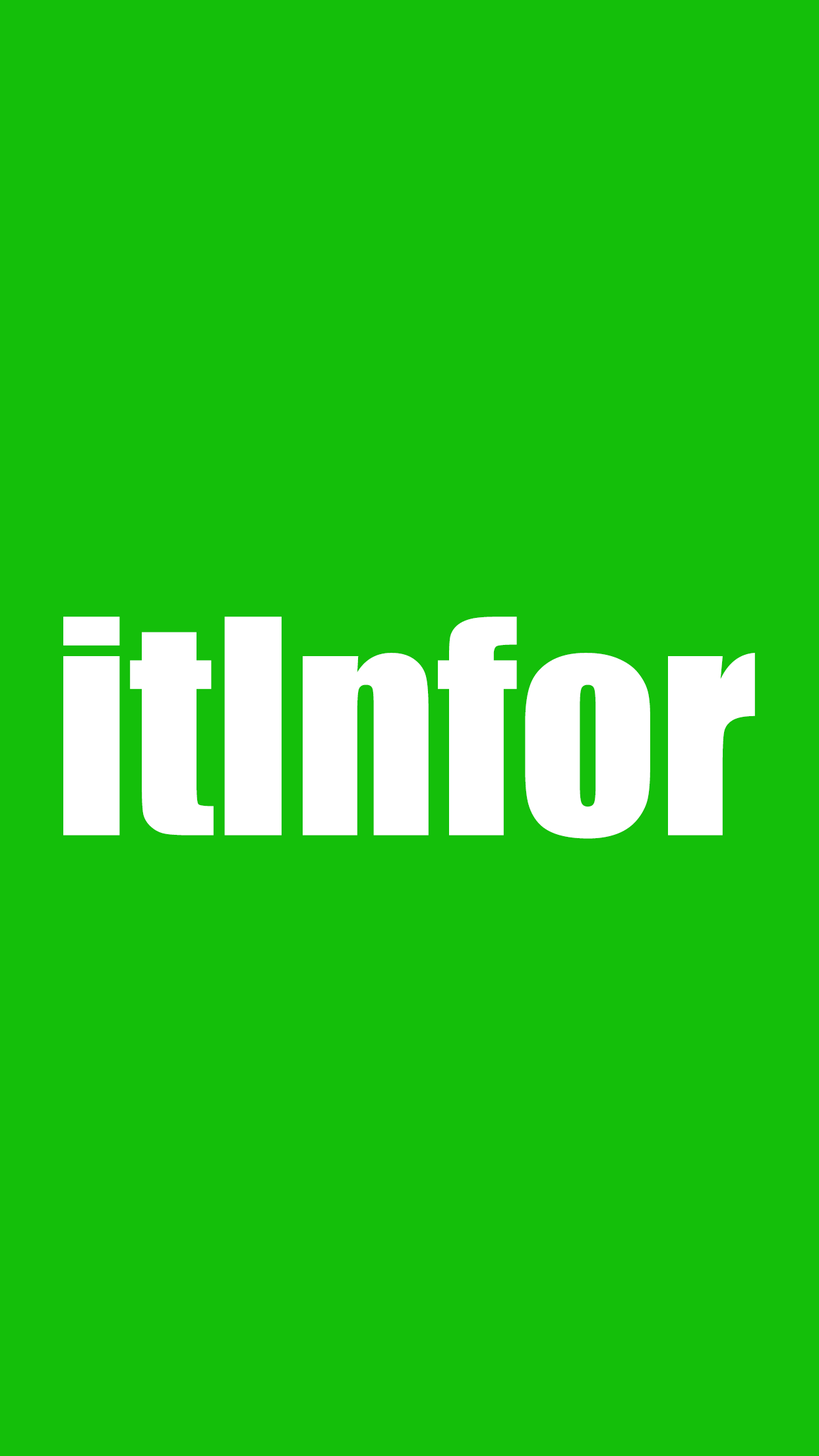
<style>
.page{position:relative;width:819px;height:1456px;background:#14bf0a}
.page>*{position:absolute;margin:0}
.t1{font:276.1px "Impact";color:#ffffff}
</style>
<div class="page">
<p class="t1" style="left:63px;top:617px;width:692px;height:222px">itInfor</p>
</div>
